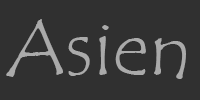
<style>
.page{position:relative;width:200px;height:100px;background:#303030}
.page>*{position:absolute;margin:0}
.t1{font:78px "TempusSansITC";color:#aaaaaa}
</style>
<div class="page">
<p class="t1" style="left:6px;top:19px;width:180px;height:60px">Asien</p>
</div>
